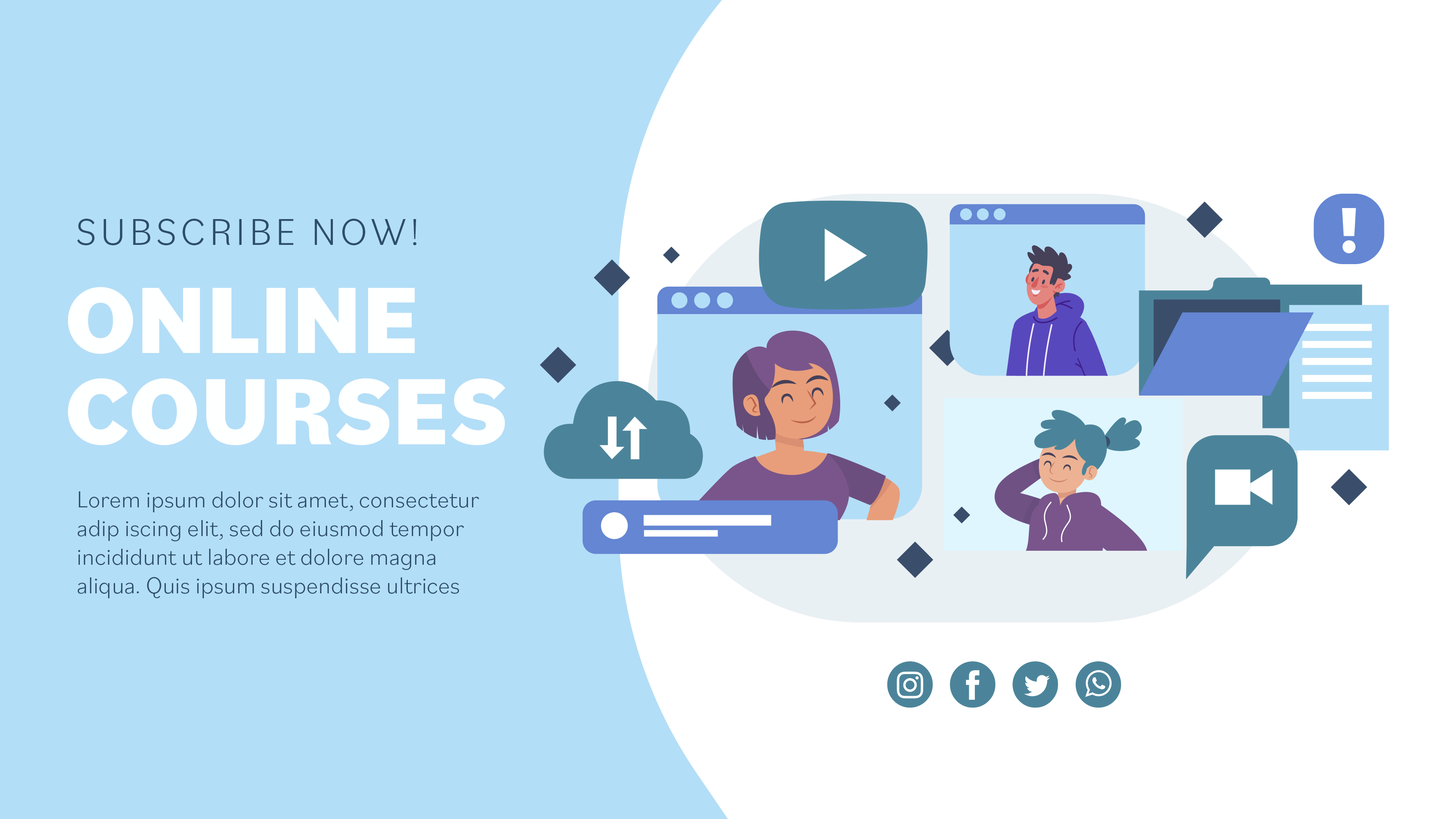
<style>
.page{position:relative;width:1456px;height:819px;background:#b3def7}
.page>*{position:absolute;margin:0}
.t1{font:38.8px "Bilo-Light";letter-spacing:0.1em;color:#2d4d6c}
.t2{font:98.4px/91.1px "Bilo-ExtraBold";color:#feffff}
.t3{font:23.9px "Bilo-Light";color:#2d4d6c}
</style>
<div class="page">
<p class="t1" style="left:77px;top:219px;width:339px;height:26px">SUBSCRIBE NOW!</p>
<p class="t2" style="left:68px;top:287px;width:437px;height:158px">ONLINE<br>COURSES</p>
<p class="t3" style="left:77px;top:491px;width:402px;height:107px">Lorem ipsum dolor sit amet, consectetur adip iscing elit, sed do eiusmod tempor incididunt ut labore et dolore magna aliqua. Quis ipsum suspendisse ultrices gravida. Risus commo<br>do viverra maecenas accumsan lacus vel facilisis.</p>
</div>
